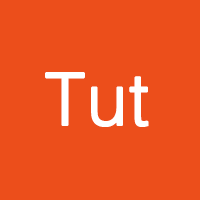
<style>
.page{position:relative;width:200px;height:200px;background:#ec4e1b}
.page>*{position:absolute;margin:0}
.t1{font:72px "Helvetica-Light";color:#ffffff;font-weight:bold}
</style>
<div class="page">
<p class="t1" style="left:45px;top:72px;width:104px;height:55px">Tut</p>
</div>
